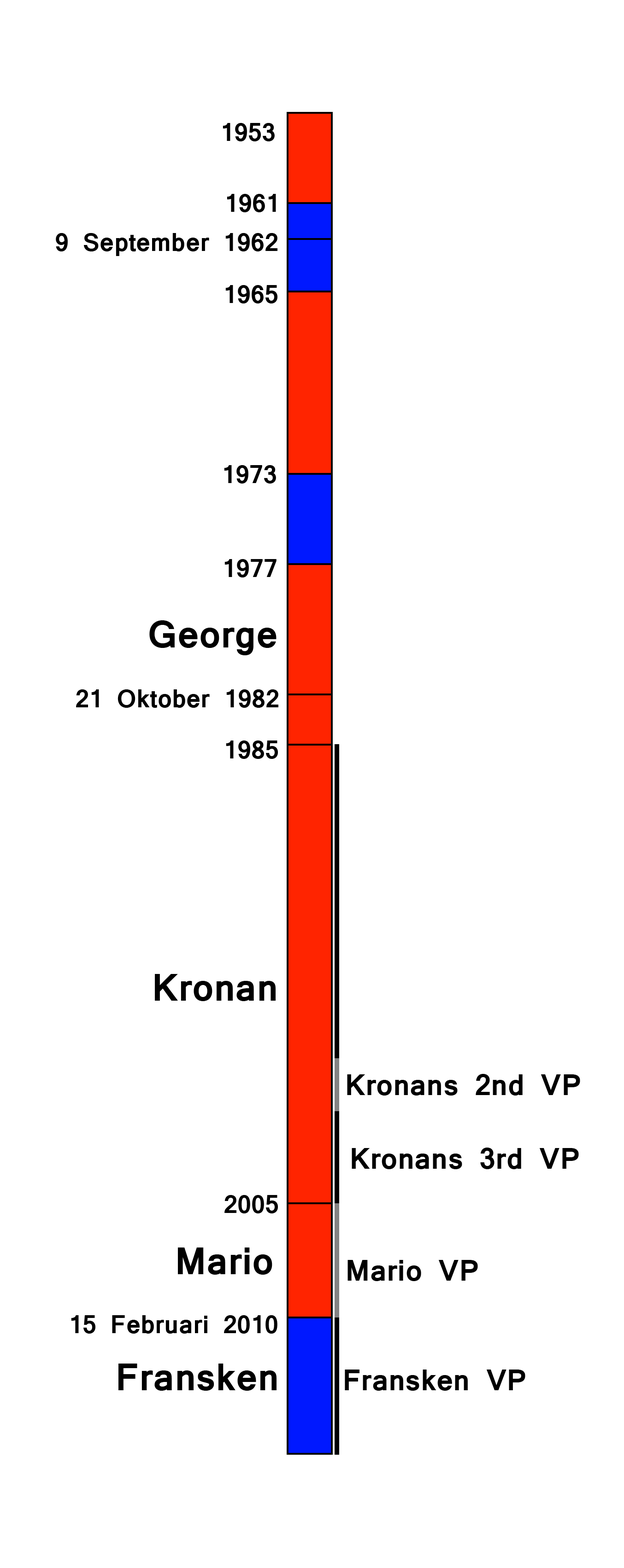
<style>
.page{position:relative;width:624px;height:1568px;background:#ffffff}
.page>*{position:absolute;margin:0}
.t1{font:27.6px "Latha-Bold";color:#000000}
.t2{font:41.4px "Latha-Bold";color:#000000}
.t3{font:32.2px "Latha-Bold";color:#000000}
</style>
<div class="page">
<p class="t1" style="left:222px;top:123px;width:52px;height:18px">1953</p>
<p class="t1" style="left:227px;top:194px;width:49px;height:18px">1961</p>
<p class="t1" style="left:56px;top:233px;width:221px;height:23px">9 September 1962</p>
<p class="t1" style="left:225px;top:285px;width:52px;height:18px">1965</p>
<p class="t1" style="left:224px;top:465px;width:52px;height:19px">1973</p>
<p class="t1" style="left:224px;top:559px;width:52px;height:18px">1977</p>
<p class="t2" style="left:149px;top:620px;width:127px;height:35px">George</p>
<p class="t1" style="left:76px;top:689px;width:202px;height:19px">21 Oktober 1982</p>
<p class="t1" style="left:226px;top:740px;width:52px;height:19px">1985</p>
<p class="t2" style="left:155px;top:974px;width:120px;height:27px">Kronan</p>
<p class="t3" style="left:347px;top:1074px;width:233px;height:22px">Kronans 2nd VP</p>
<p class="t3" style="left:351px;top:1148px;width:227px;height:21px">Kronans 3rd VP</p>
<p class="t1" style="left:224px;top:1195px;width:54px;height:18px">2005</p>
<p class="t2" style="left:178px;top:1247px;width:94px;height:28px">Mario</p>
<p class="t3" style="left:347px;top:1260px;width:131px;height:21px">Mario VP</p>
<p class="t1" style="left:71px;top:1315px;width:206px;height:19px">15 Februari 2010</p>
<p class="t2" style="left:118px;top:1364px;width:158px;height:27px">Fransken</p>
<p class="t3" style="left:344px;top:1370px;width:181px;height:21px">Fransken VP</p>
</div>
